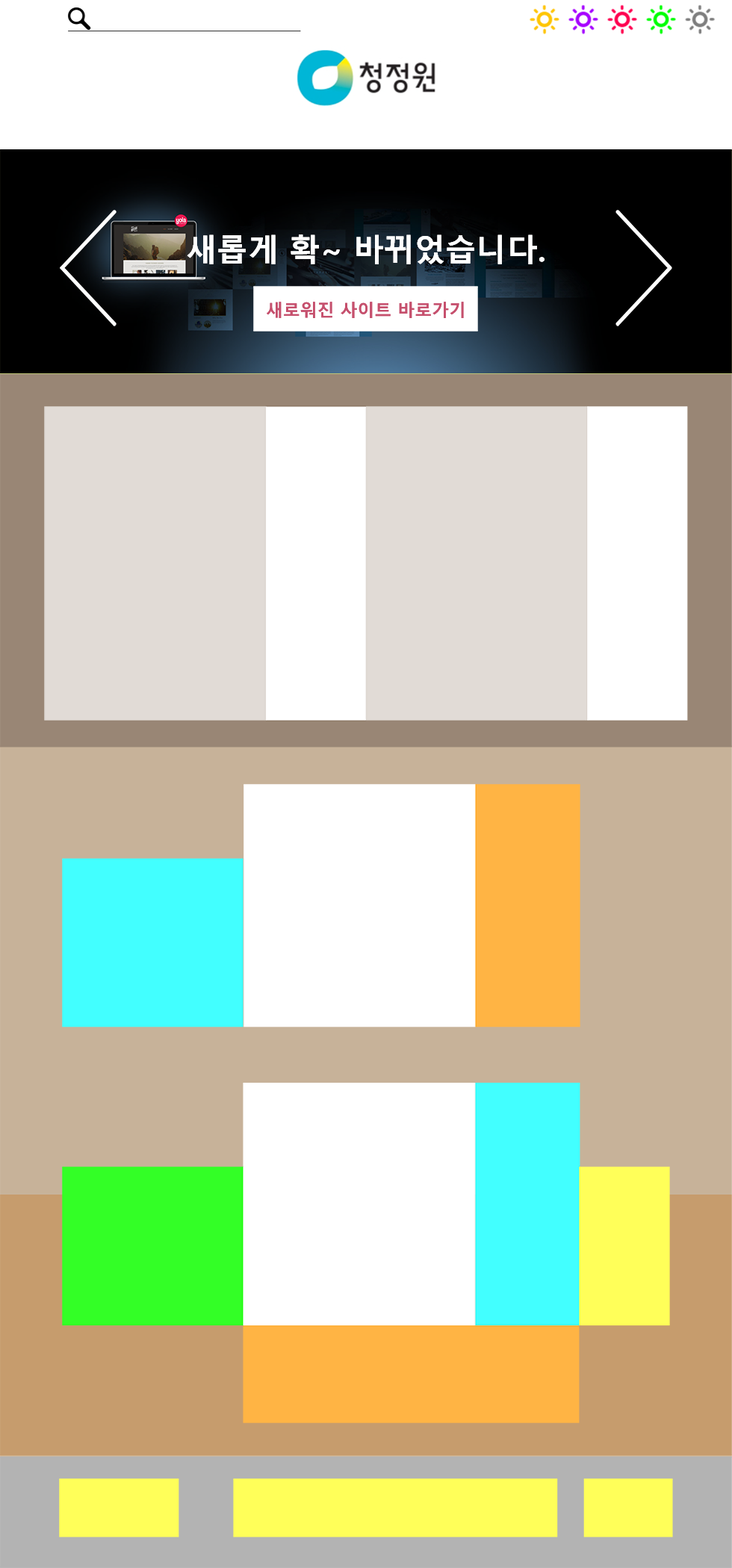
<style>
.page{position:relative;width:732px;height:1568px;background:#ffffff}
.page>*{position:absolute;margin:0}
.t1{font:30.8px "MalgunGothicBold";color:#ffffff}
.t2{font:17.1px "MalgunGothicBold";color:#c6386d}
.t3{font:17.1px "MalgunGothicBold";color:#c6506d}
</style>
<div class="page">
<p class="t1" style="left:187px;top:234px;width:357px;height:30px">새롭게 확~ 바뀌었습니다.</p>
<p class="t1" style="left:187px;top:234px;width:357px;height:30px">새롭게 확~ 바뀌었습니다.</p>
<p class="t2" style="left:267px;top:302px;width:197px;height:16px">새로워진 사이트 바로가기</p>
<p class="t3" style="left:267px;top:302px;width:197px;height:16px">새로워진 사이트 바로가기</p>
</div>
